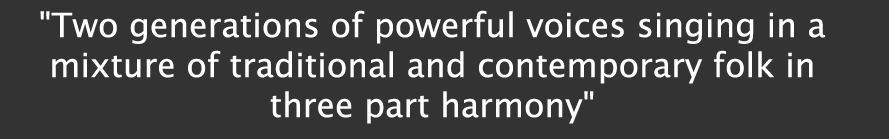
<style>
.page{position:relative;width:889px;height:139px;background:#333333}
.page>*{position:absolute;margin:0}
.t1{font:33.3px "LucidaSansUnicode";color:#ffffff}
</style>
<div class="page">
<p class="t1" style="left:40px;top:10px;width:786px;height:114px;text-align:center">"Two generations of powerful voices singing in a mixture of traditional and contemporary folk in three part harmony"</p>
</div>
